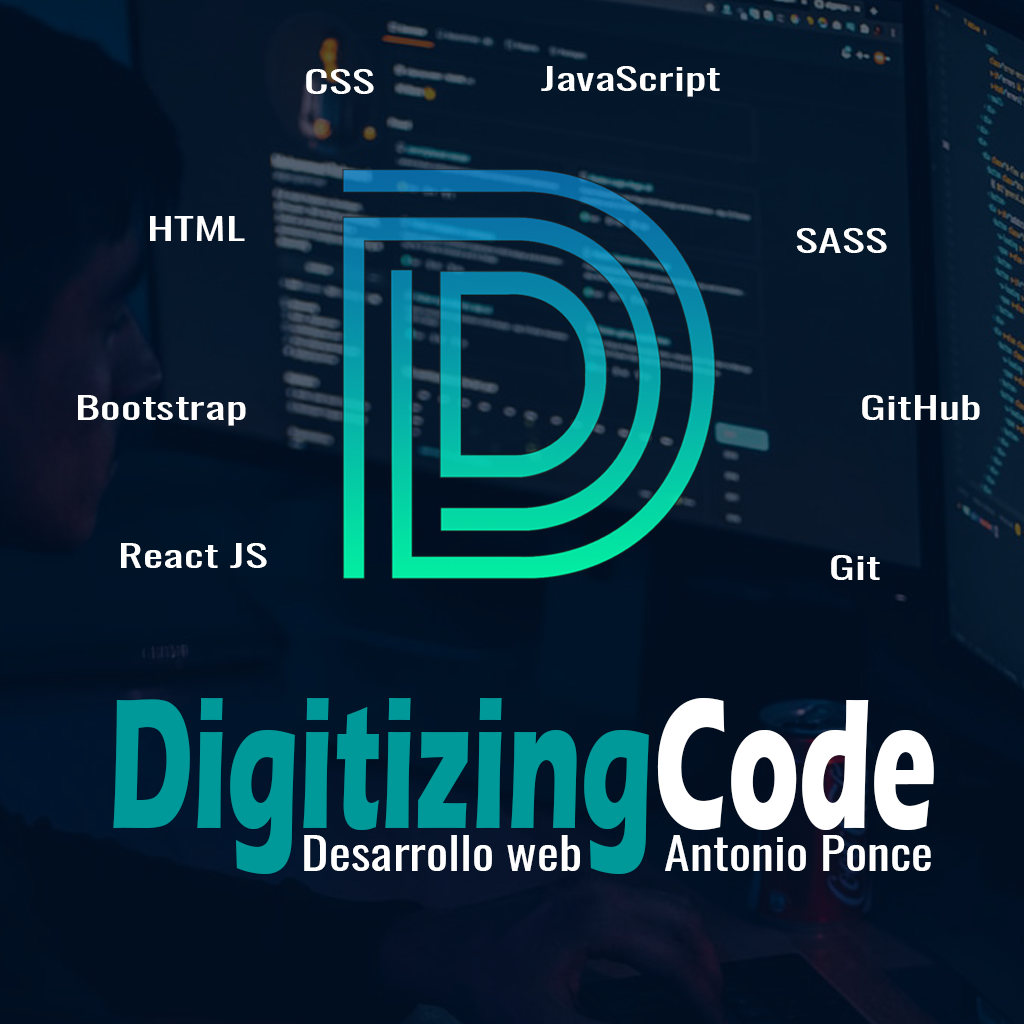
<style>
.page{position:relative;width:1024px;height:1024px}
.page>*{position:absolute;margin:0}
.t1{font:29.7px "Oswald-Regular";color:#ffffff;scale:1.63 1}
.t2{font:192.4px "ErasITC-Bold";color:#009999;scale:0.57 1}
.t3{font:192.4px "ErasITC-Bold";color:#ffffff;scale:0.57 1}
.t4{font:44.2px "Oswald-Regular";color:#ffffff;scale:1.18 1}
</style>
<div class="page">
<p class="t1" style="left:306px;top:69px;width:68px;height:25px">CSS</p>
<p class="t1" style="left:541px;top:66px;width:179px;height:31px">JavaScript</p>
<p class="t1" style="left:150px;top:216px;width:95px;height:25px">HTML</p>
<p class="t1" style="left:796px;top:228px;width:91px;height:25px">SASS</p>
<p class="t1" style="left:78px;top:395px;width:168px;height:31px">Bootstrap</p>
<p class="t1" style="left:862px;top:395px;width:118px;height:25px">GitHub</p>
<p class="t1" style="left:121px;top:543px;width:146px;height:25px">React JS</p>
<p class="t1" style="left:831px;top:555px;width:49px;height:25px">Git</p>
<p class="t2" style="left:113px;top:698px;width:821px;height:176px">Digitizing<span class="t3">Code</span></p>
<p class="t4" style="left:304px;top:835px;width:276px;height:36px">Desarrollo web</p>
<p class="t4" style="left:665px;top:835px;width:266px;height:36px">Antonio Ponce</p>
</div>
